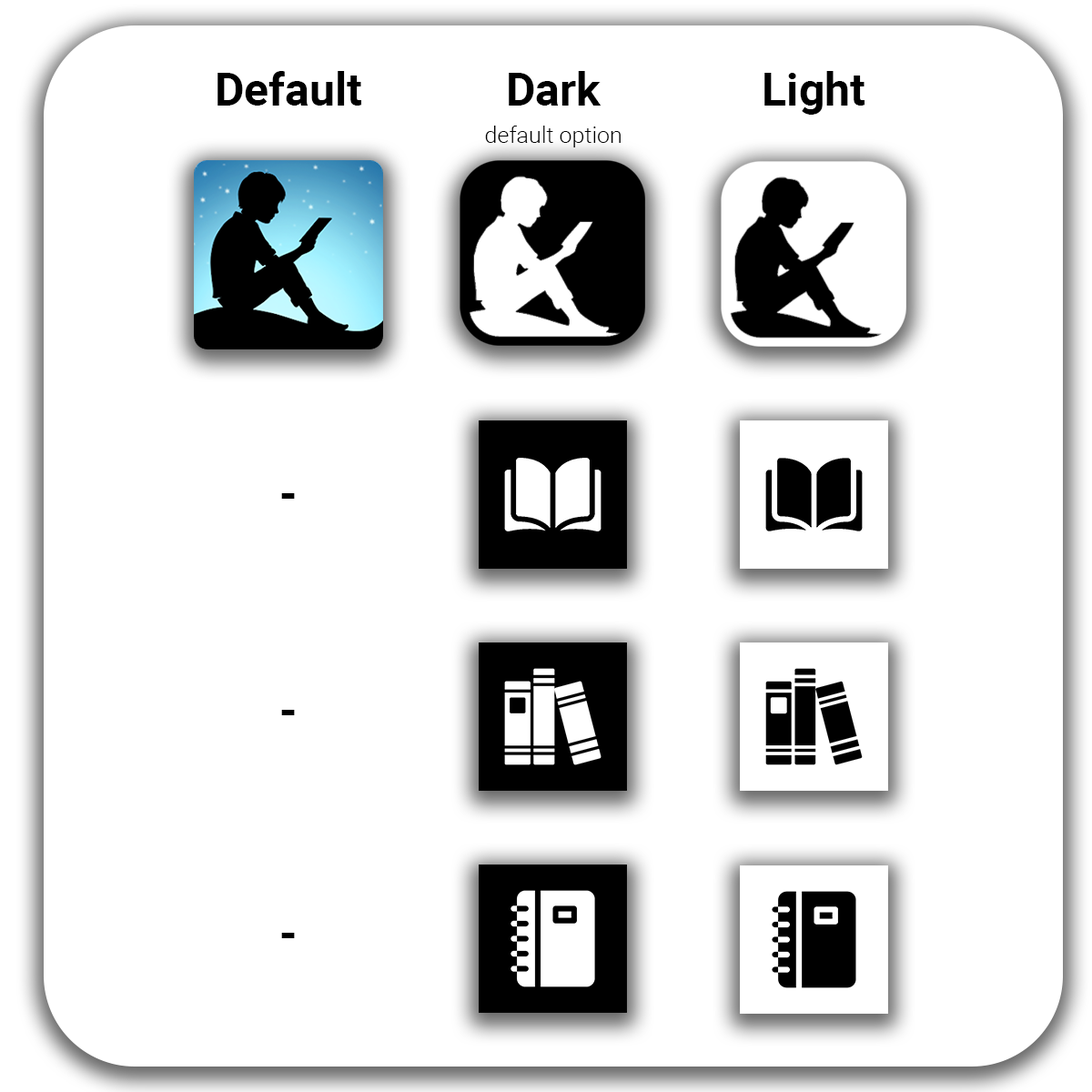
<style>
.page{position:relative;width:1092px;height:1092px;background:#ffffff}
.page>*{position:absolute;margin:0}
.t1{font:45.5px "Roboto-Bold";color:#000000}
.t2{font:22.7px "Roboto-Light";color:#000000}
</style>
<div class="page">
<p class="t1" style="left:217px;top:71px;width:144px;height:35px">Default</p>
<p class="t1" style="left:509px;top:71px;width:93px;height:35px">Dark</p>
<p class="t1" style="left:764px;top:71px;width:100px;height:44px">Light</p>
<p class="t2" style="left:485px;top:126px;width:136px;height:21px">default option</p>
<p class="t1" style="left:281px;top:493px;width:14px;height:6px">-</p>
<p class="t1" style="left:281px;top:710px;width:14px;height:5px">-</p>
<p class="t1" style="left:281px;top:933px;width:14px;height:5px">-</p>
</div>
